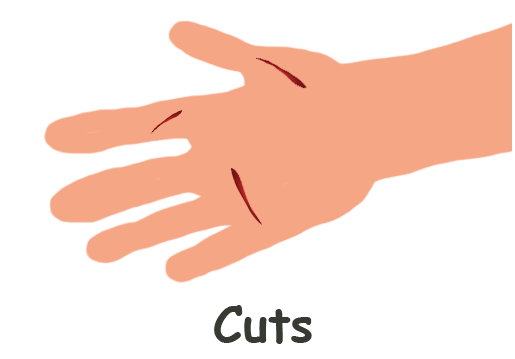
<style>
.page{position:relative;width:515px;height:359px;background:#ffffff}
.page>*{position:absolute;margin:0}
.t1{font:48px "ComicSansMS-Bold";color:#373933}
</style>
<div class="page">
<p class="t1" style="left:214px;top:305px;width:98px;height:39px">Cuts</p>
</div>
